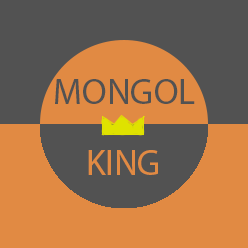
<style>
.page{position:relative;width:248px;height:248px;background:#525252}
.page>*{position:absolute;margin:0}
.t1{font:36px "MyriadPro-Regular";color:#525252}
.t2{font:36px "MyriadPro-Regular";color:#e18a43}
</style>
<div class="page">
<p class="t1" style="left:55px;top:79px;width:140px;height:25px">MONGOL</p>
<p class="t2" style="left:88px;top:150px;width:70px;height:25px">KING</p>
</div>
